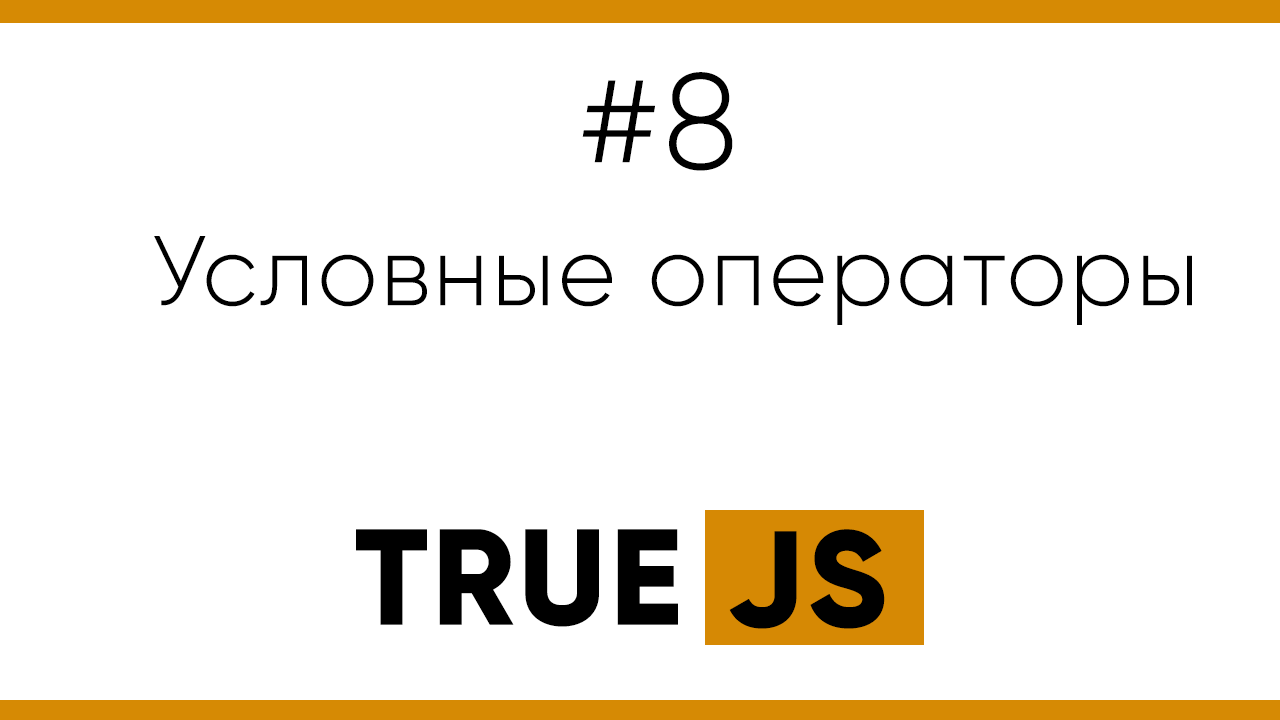
<style>
.page{position:relative;width:1280px;height:720px;background:#ffffff}
.page>*{position:absolute;margin:0}
.t1{font:136px "Gilroy-Light";letter-spacing:0.025em;color:#000000}
.t2{font:99px "Gilroy-Light";letter-spacing:0.025em;color:#000000}
.t3{font:136px "Gilroy-ExtraBold";letter-spacing:0.025em;color:#000000}
</style>
<div class="page">
<p class="t1" style="left:582px;top:72px;width:151px;height:99px">#8</p>
<p class="t2" style="left:154px;top:236px;width:1038px;height:89px">Условные операторы</p>
<p class="t3" style="left:356px;top:529px;width:322px;height:98px">TRUE</p>
<p class="t3" style="left:729px;top:529px;width:156px;height:100px">JS</p>
</div>
